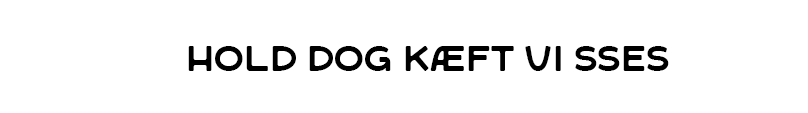
<style>
.page{position:relative;width:808px;height:113px;background:#ffffff}
.page>*{position:absolute;margin:0}
.t1{font:35.4px "SFCWosterSans-Regular";color:#000000}
</style>
<div class="page">
<p class="t1" style="left:188px;top:46px;width:481px;height:25px">Hold dog kæft vi sses</p>
</div>
